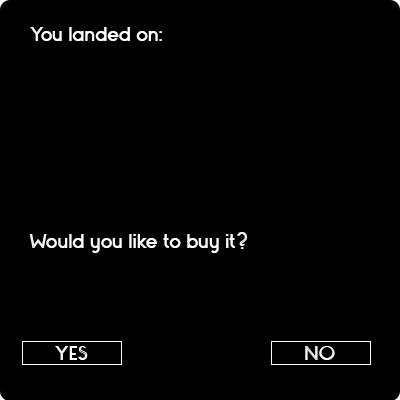
<style>
.page{position:relative;width:400px;height:400px;background:#000000}
.page>*{position:absolute;margin:0}
.t1{font:24px "Monopoly-Inline";color:#ffffff}
</style>
<div class="page">
<p class="t1" style="left:30px;top:27px;width:132px;height:14px">You landed on:</p>
<p class="t1" style="left:29px;top:232px;width:218px;height:21px">Would you like to buy it?</p>
<p class="t1" style="left:55px;top:346px;width:33px;height:14px">YES</p>
<p class="t1" style="left:305px;top:346px;width:30px;height:14px">NO</p>
</div>
